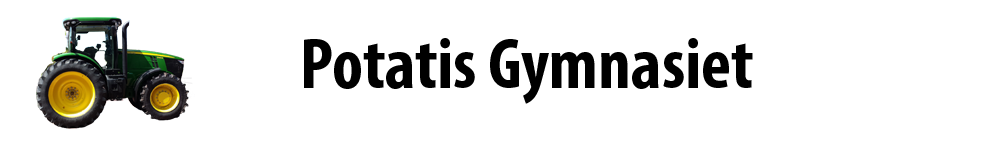
<style>
.page{position:relative;width:1000px;height:150px;background:#ffffff}
.page>*{position:absolute;margin:0}
.t1{font:72px "MyriadPro-BoldCond";color:#000000}
</style>
<div class="page">
<p class="t1" style="left:304px;top:38px;width:449px;height:66px">Potatis Gymnasiet</p>
</div>
